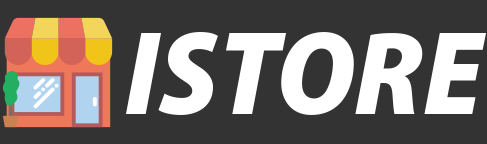
<style>
.page{position:relative;width:487px;height:144px;background:#333333}
.page>*{position:absolute;margin:0}
.t1{font:120px "MyriadPro-BlackSemiCnIt";color:#ffffff;text-transform:uppercase}
</style>
<div class="page">
<p class="t1" style="left:126px;top:32px;width:360px;height:83px">istore</p>
</div>
